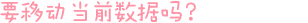
<style>
.page{position:relative;width:308px;height:23px;background:#ffffff}
.page>*{position:absolute;margin:0}
.t1{font:26px "¢è?";color:#ff93a5}
</style>
<div class="page">
<p class="t1" style="left:0px;top:1px;width:196px;height:22px">要移动当前数据吗？</p>
</div>
